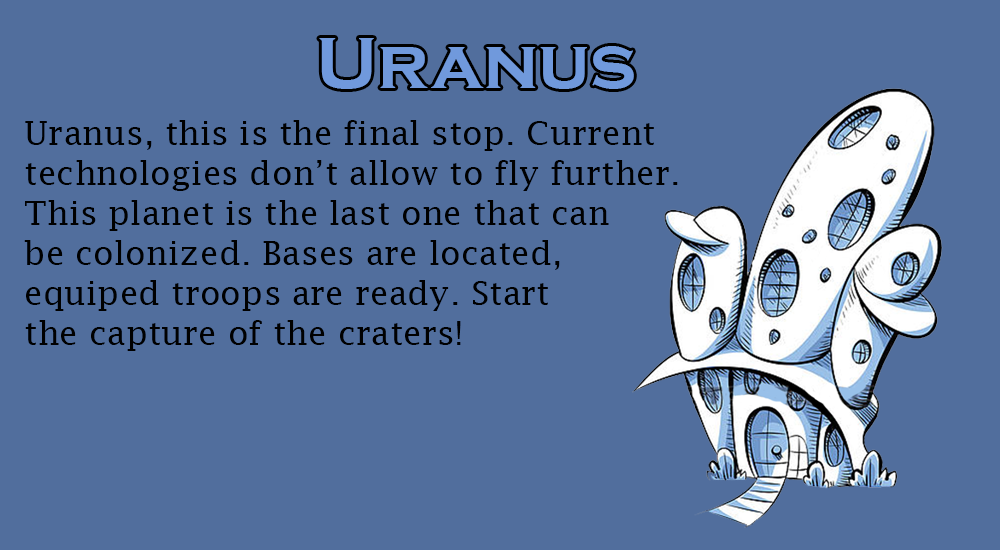
<style>
.page{position:relative;width:1000px;height:550px;background:#516e9d}
.page>*{position:absolute;margin:0}
.t1{font:75px "CopperplateGothic-Bold";color:#7099dc}
.t2{font:33.3px "LucidaFax";color:#000000}
</style>
<div class="page">
<p class="t1" style="left:319px;top:38px;width:315px;height:51px">Uranus</p>
<p class="t2" style="left:24px;top:120px;width:654px;height:231px">Uranus, this is the final stop. Current<br>technologies don’t allow to fly further.<br>This planet is the last one that can<br>be colonized. Bases are located,<br>equiped troops are ready. Start<br>the capture of the craters!</p>
</div>
